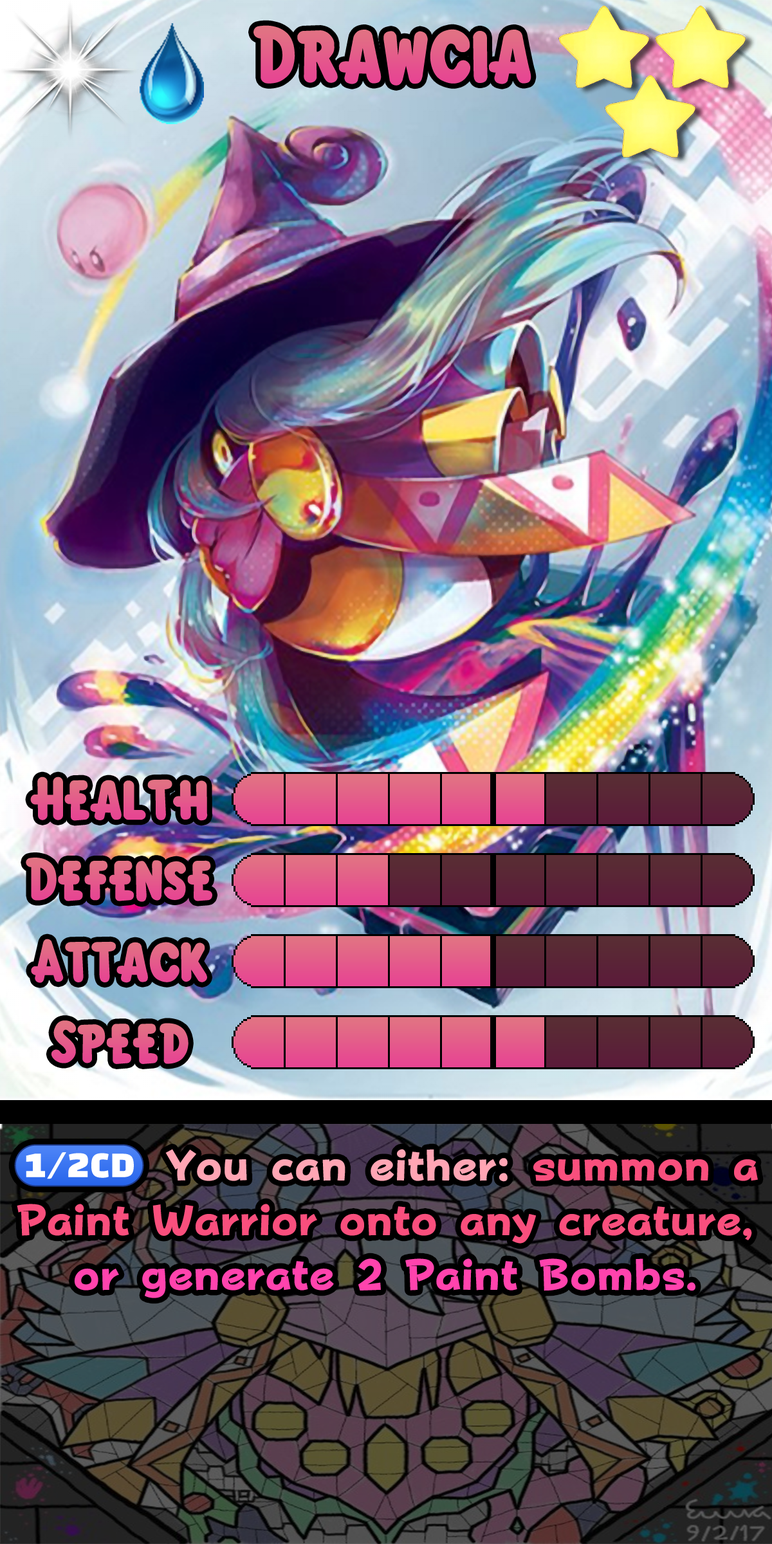
<style>
.page{position:relative;width:772px;height:1544px}
.page>*{position:absolute;margin:0}
.t1{font:125.5px "KirbyClassic";color:#e45a8b}
.t2{font:92.7px "KirbyClassic";color:#e45a8b}
.t3{font:92.7px "KirbyClassic";color:#e45c8a}
.t4{font:74px/54.7px "FOTPopHappinessStrp-ExtraBold";color:#f94f7d}
.t5{font:74px/54.7px "stoogedings-Regular";color:#ffa5b4}
.t6{font:74px/54.7px "FOTPopHappinessStrp-ExtraBold";color:#ffa5b4}
.t7{font:74px/54.7px "FOTPopHappinessStrp-ExtraBold";color:#ff43ad}
</style>
<div class="page">
<p class="t1" style="left:254px;top:25px;width:277px;height:61px">Drawcia</p>
<p class="t2" style="left:30px;top:777px;width:178px;height:44px">Health</p>
<p class="t3" style="left:26px;top:858px;width:186px;height:44px">Defense</p>
<p class="t2" style="left:31px;top:939px;width:176px;height:44px">Attack</p>
<p class="t3" style="left:51px;top:1021px;width:138px;height:43px">Speed</p>
<p class="t4" style="left:14px;top:1144px;width:744px;height:154px;text-align:center"><span class="t5">(1/2CD)</span><span class="t6"> You can either: </span>summon a Paint Warrior onto any creature,<br><span class="t7">or generate 2 Paint Bombs.</span></p>
</div>
